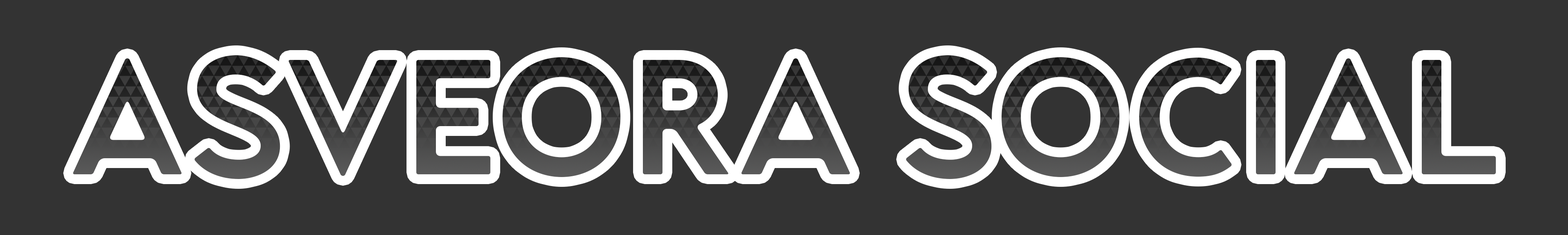
<style>
.page{position:relative;width:1568px;height:235px;background:#333333}
.page>*{position:absolute;margin:0}
.t1{font:163.5px "LequireDEMO";color:#444444}
</style>
<div class="page">
<p class="t1" style="left:73px;top:55px;width:1423px;height:124px">ASVEORA SOCIAL</p>
</div>
